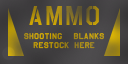
<style>
.page{position:relative;width:128px;height:64px}
.page>*{position:absolute;margin:0}
.t1{font:26px "USAAF_Stencil";letter-spacing:0.1em}
.t2{font:8px/9px "USAAF_Stencil";letter-spacing:0.1em;color:#b59410}
</style>
<div class="page">
<p class="t1" style="left:29px;top:6px;width:70px;height:19px">AMMO</p>
<p class="t2" style="left:24px;top:33px;width:80px;height:16px;text-align:justify">shooting blanks restock here</p>
</div>
